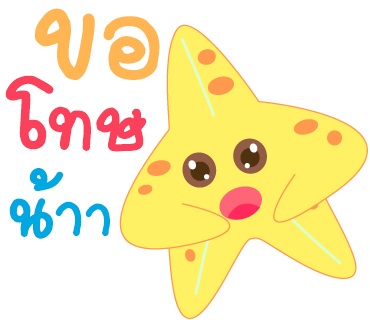
<style>
.page{position:relative;width:370px;height:320px;background:#ffffff}
.page>*{position:absolute;margin:0}
.t1{font:186px "2005_iannnnnMTV";color:#ffb652;scale:1.06 1}
.t2{font:166px "2005_iannnnnMTV";color:#ffb652;scale:1.06 1}
.t3{font:117px "2005_iannnnnMTV";letter-spacing:-0.025em;color:#fa405a;scale:1.06 1}
.t4{font:137px "2005_iannnnnMTV";letter-spacing:-0.025em;color:#fa405a;scale:1.06 1}
.t5{font:110px "2005_iannnnnMTV";color:#00a8e1;scale:1.06 1}
.t6{font:100px "2005_iannnnnMTV";color:#00a8e1;scale:1.06 1}
.t7{font:95px "2005_iannnnnMTV";color:#00a8e1;scale:1.06 1}
</style>
<div class="page">
<p class="t1" style="left:35px;top:8px;width:125px;height:72px">ข<span class="t2">อ</span></p>
<p class="t3" style="left:5px;top:75px;width:142px;height:77px"><span class="t4">โ</span>ทษ</p>
<p class="t5" style="left:9px;top:168px;width:101px;height:71px">น้<span class="t6">า</span><span class="t7">า</span></p>
</div>
